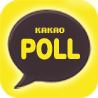
<style>
.page{position:relative;width:98px;height:98px}
.page>*{position:absolute;margin:0}
.t1{font:7.1px "Kroeger0666";letter-spacing:-0.11em;color:#f9e81e;scale:0.94 1}
.t2{font:28.3px "HelveticaRounded-Black";letter-spacing:-0.05em;color:#f9e81e;scale:0.78 1}
.t3{font:28.3px "HelveticaRounded-Black";letter-spacing:-0.05em;color:#f9e81e;scale:0.76 1}
</style>
<div class="page">
<p class="t1" style="left:35px;top:27px;width:30px;height:7px">KAKAO</p>
<p class="t2" style="left:21px;top:38px;width:59px;height:22px">P<span class="t3">O</span>LL</p>
</div>
